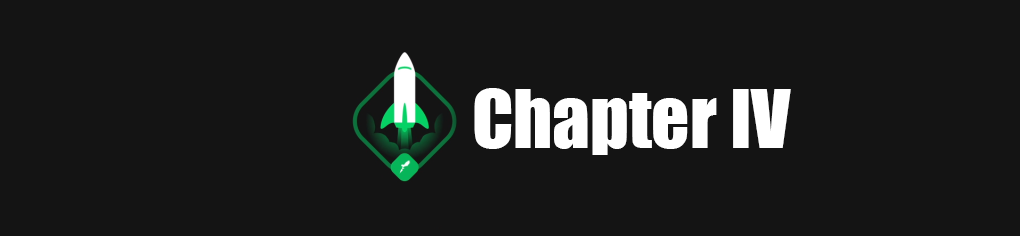
<style>
.page{position:relative;width:1020px;height:236px;background:#141414}
.page>*{position:absolute;margin:0}
.t1{font:74.6px "Impact";color:#ffffff}
</style>
<div class="page">
<p class="t1" style="left:474px;top:88px;width:317px;height:67px">Chapter IV</p>
</div>
